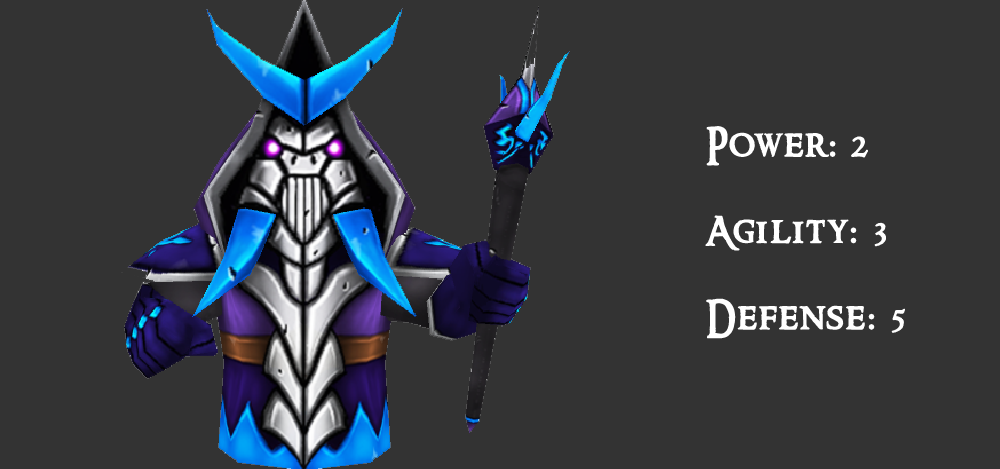
<style>
.page{position:relative;width:1000px;height:469px;background:#333333}
.page>*{position:absolute;margin:0}
.t1{font:36px "RingbearMedium";letter-spacing:0.05em;color:#ffffff;font-weight:bold}
.t2{font:36px "BodoniMT";letter-spacing:0.05em;color:#ffffff;font-weight:bold}
</style>
<div class="page">
<p class="t1" style="left:705px;top:126px;width:200px;height:213px;text-align:right">Power<span class="t2">:</span> 2<br><br>Agility<span class="t2">:</span> 3<br><br>Defense<span class="t2">:</span> 5</p>
</div>
